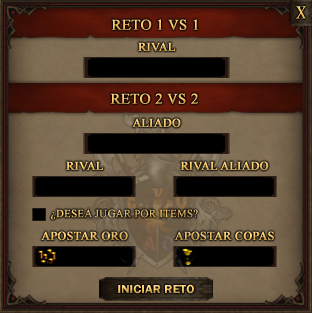
<style>
.page{position:relative;width:312px;height:313px}
.page>*{position:absolute;margin:0}
.t1{font:18px "TimesNewRomanPSMT";text-transform:uppercase;font-weight:bold;scale:0.75 1}
.t2{font:14.7px "TimesNewRomanPSMT";letter-spacing:0.01em;color:#fecd6b;text-transform:uppercase;font-weight:bold}
.t3{font:12px "TimesNewRomanPSMT";letter-spacing:0.01em;text-transform:uppercase;font-weight:bold}
.t4{font:14.7px "TimesNewRomanPSMT";letter-spacing:0.01em;text-transform:uppercase;font-weight:bold}
.t5{font:10.7px "TimesNewRomanPSMT";letter-spacing:0.01em;text-transform:uppercase;font-weight:bold}
.t6{font:12px "FranklinGothic-Demi";scale:1.07 1}
</style>
<div class="page">
<p class="t1" style="left:296px;top:6px;width:11px;height:13px">X</p>
<p class="t2" style="left:111px;top:19px;width:87px;height:11px">rETO 1 VS 1</p>
<p class="t3" style="left:138px;top:42px;width:38px;height:10px">RIVAL</p>
<p class="t4" style="left:110px;top:93px;width:88px;height:11px">rETO 2 VS 2</p>
<p class="t3" style="left:132px;top:118px;width:49px;height:10px">ALIADO</p>
<p class="t3" style="left:66px;top:161px;width:38px;height:10px">RivAL</p>
<p class="t3" style="left:180px;top:161px;width:89px;height:10px">RIVAL ALIADO</p>
<p class="t5" style="left:51px;top:209px;width:147px;height:11px">¿Desea jugar por items?</p>
<p class="t3" style="left:41px;top:231px;width:87px;height:10px">Apostar oro</p>
<p class="t3" style="left:174px;top:231px;width:100px;height:10px">apostar copas</p>
<p class="t6" style="left:118px;top:284px;width:76px;height:10px">INICIAR RETO</p>
</div>
